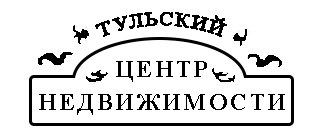
<style>
.page{position:relative;width:322px;height:135px;background:#ffffff}
.page>*{position:absolute;margin:0}
.t1{font:20px "TimesNewRomanPSMT";letter-spacing:0.1em;color:#000000;text-transform:uppercase}
.t2{font:24px "TimesNewRomanPS-BoldMT";letter-spacing:0.1em;color:#000000;text-transform:uppercase}
</style>
<div class="page">
<p class="t1" style="left:95px;top:12px;width:132px;height:25px">Тульский</p>
<p class="t2" style="left:116px;top:61px;width:91px;height:21px">Центр</p>
<p class="t2" style="left:39px;top:94px;width:246px;height:21px">Недвижимости</p>
</div>
